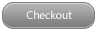
<style>
.page{position:relative;width:97px;height:30px}
.page>*{position:absolute;margin:0}
.t1{font:11px "SegoeUI";color:#ffffff}
</style>
<div class="page">
<p class="t1" style="left:26px;top:10px;width:46px;height:9px">Checkout</p>
</div>
